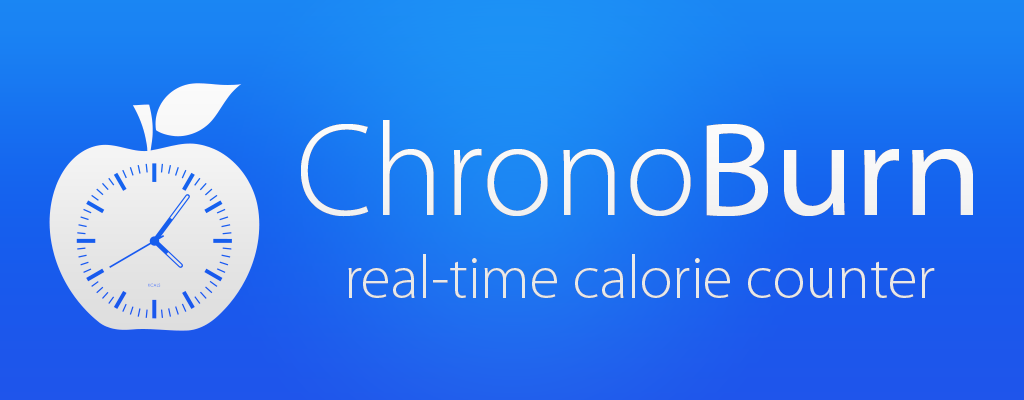
<style>
.page{position:relative;width:1024px;height:400px}
.page>*{position:absolute;margin:0}
.t1{font:60.4px/83.3px "MyriadPro-Light";color:#ffffff}
.t2{font:133.3px "MyriadPro-Light";color:#ffffff}
.t3{font:133.3px "MyriadPro-SemiExt";color:#ffffff}
</style>
<div class="page">
<p class="t1" style="left:301px;top:120px;width:672px;height:178px;text-align:center"><span class="t2">Chrono</span><span class="t3">Burn<br></span>real-time calorie counter</p>
</div>
